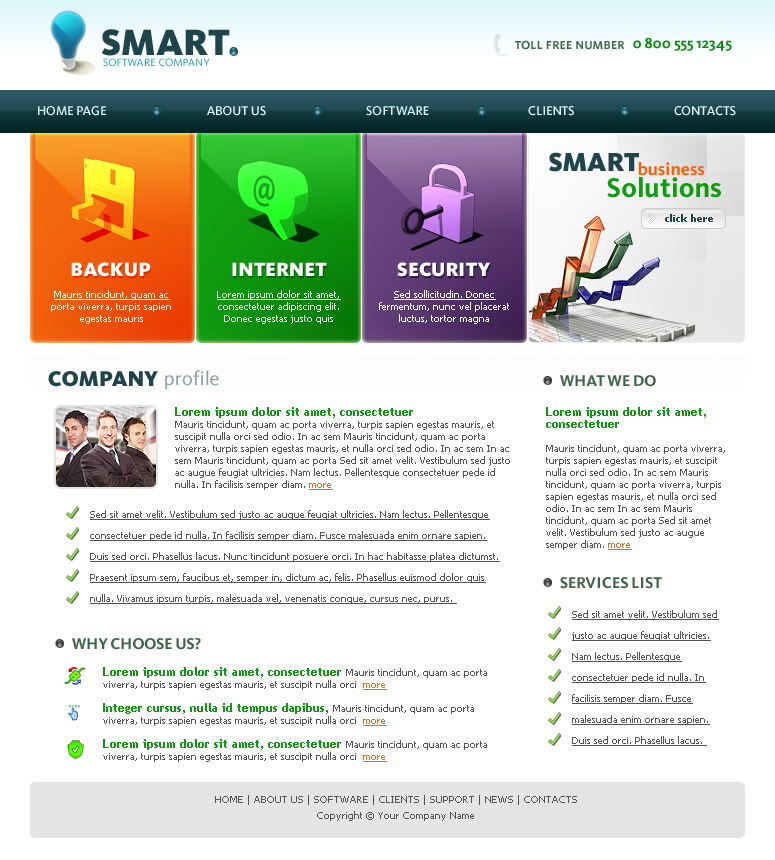
<style>
.page{position:relative;width:775px;height:860px;background:#ffffff}
.page>*{position:absolute;margin:0}
.t1{font:38px "Kievit-Black";color:#1f444c}
.t2{font:12px "Kievit-Bold";color:#3d6547}
.t3{font:15px "Kievit-Bold";color:#0b8c0b}
.t4{font:11px "Kievit-Regular";color:#169ec1}
.t5{font:13px "Kievit-Medium";color:#daf5f9}
.t6{font:27px "Kievit-Black";color:#1f444c}
.t7{font:18px "Kievit-Bold";color:#f2630b}
.t8{font:28px "Kievit-Bold";color:#0f9c0f}
.t9{font:10px "Tahoma-Bold";color:#1f444c}
.t10{font:20px "Kievit-Black";color:#ffffff}
.t11{font:10px/12px "Tahoma";color:#ffffff}
.t12{font:10px/12px "Tahoma";color:#ffffff;text-decoration:underline}
.t13{font:22px "Kievit-Black";color:#1f444c}
.t14{font:20px "Kievit-Book";color:#8ea1a5}
.t15{font:16px "Kievit-Bold";color:#3d6547}
.t16{font:10px/12px "Tahoma";color:#535353}
.t17{font:12px/12px "TrebuchetMS-Bold";color:#0f990f}
.t18{font:10px/12px "Tahoma";color:#f2660c;text-decoration:underline}
.t19{font:10px/21px "Tahoma";color:#535353;text-decoration:underline}
.t20{font:10px/16px "Tahoma";color:#535353}
</style>
<div class="page">
<p class="t1" style="left:101px;top:29px;width:129px;height:27px">SMART</p>
<p class="t2" style="left:515px;top:40px;width:110px;height:10px">TOLL FREE NUMBER</p>
<p class="t3" style="left:633px;top:37px;width:99px;height:14px">0 800 555 12345</p>
<p class="t4" style="left:103px;top:58px;width:107px;height:9px">SOFTWARE COMPANY</p>
<p class="t5" style="left:38px;top:106px;width:68px;height:10px">HOME PAGE</p>
<p class="t5" style="left:207px;top:106px;width:59px;height:10px">ABOUT US</p>
<p class="t5" style="left:366px;top:106px;width:63px;height:10px">SOFTWARE</p>
<p class="t5" style="left:528px;top:106px;width:46px;height:10px">CLIENTS</p>
<p class="t5" style="left:674px;top:106px;width:62px;height:10px">CONTACTS</p>
<p class="t6" style="left:549px;top:152px;width:90px;height:20px">SMART</p>
<p class="t7" style="left:638px;top:162px;width:67px;height:14px">business</p>
<p class="t8" style="left:607px;top:177px;width:114px;height:21px">Solutions</p>
<p class="t9" style="left:665px;top:214px;width:48px;height:8px">click here</p>
<p class="t10" style="left:71px;top:262px;width:80px;height:15px">BACKUP</p>
<p class="t10" style="left:232px;top:262px;width:95px;height:14px">INTERNET</p>
<p class="t10" style="left:397px;top:262px;width:93px;height:15px">SECURITY</p>
<p class="t11" style="left:51px;top:290px;width:120px;height:34px;text-align:center"><span class="t12">Mauris tincidunt, quam ac </span>porta viverra, turpis sapien egestas mauris</p>
<p class="t11" style="left:217px;top:290px;width:124px;height:34px;text-align:center"><span class="t12">Lorem ipsum dolor sit amet, </span>consectetuer adipiscing elit. Donec egestas justo quis</p>
<p class="t11" style="left:379px;top:290px;width:130px;height:34px;text-align:center"><span class="t12">Sed sollicitudin. Donec </span>fermentum, nunc vel placerat luctus, tortor magna</p>
<p class="t13" style="left:48px;top:371px;width:110px;height:16px">COMPANY</p>
<p class="t14" style="left:165px;top:370px;width:54px;height:20px">profile</p>
<p class="t15" style="left:560px;top:375px;width:96px;height:12px">WHAT WE DO</p>
<p class="t16" style="left:175px;top:407px;width:335px;height:83px"><span class="t17">Lorem ipsum dolor sit amet, consectetuer <br></span>Mauris tincidunt, quam ac porta viverra, turpis sapien egestas mauris, et suscipit nulla orci sed odio. In ac sem Mauris tincidunt, quam ac porta viverra, turpis sapien egestas mauris, et nulla orci sed odio. In ac sem In ac sem Mauris tincidunt, quam ac porta Sed sit amet velit. Vestibulum sed justo ac augue feugiat ultricies. Nam lectus. Pellentesque consectetuer pede id nulla. In facilisis semper diam. <span class="t18">more</span></p>
<p class="t16" style="left:546px;top:407px;width:179px;height:143px"><span class="t17">Lorem ipsum dolor sit amet, consectetuer <br><br></span>Mauris tincidunt, quam ac porta viverra, turpis sapien egestas mauris, et suscipit nulla orci sed odio. In ac sem Mauris tincidunt, quam ac porta viverra, turpis sapien egestas mauris, et nulla orci sed odio. In ac sem In ac sem Mauris tincidunt, quam ac porta Sed sit amet velit. Vestibulum sed justo ac augue semper diam. <span class="t18">more</span></p>
<p class="t19" style="left:90px;top:510px;width:410px;height:94px">Sed sit amet velit. Vestibulum sed justo ac augue feugiat ultricies. Nam lectus. Pellentesque consectetuer pede id nulla. In facilisis semper diam. Fusce malesuada enim ornare sapien. Duis sed orci. Phasellus lacus. Nunc tincidunt posuere orci. In hac habitasse platea dictumst. Praesent ipsum sem, faucibus et, semper in, dictum ac, felis. Phasellus euismod dolor quis nulla. Vivamus ipsum turpis, malesuada vel, venenatis congue, cursus nec, purus.</p>
<p class="t15" style="left:560px;top:577px;width:102px;height:12px">SERVICES LIST</p>
<p class="t19" style="left:572px;top:610px;width:147px;height:136px">Sed sit amet velit. Vestibulum sed justo ac augue feugiat ultricies. Nam lectus. Pellentesque consectetuer pede id nulla. In facilisis semper diam. Fusce malesuada enim ornare sapien. Duis sed orci. Phasellus lacus.</p>
<p class="t15" style="left:72px;top:638px;width:129px;height:12px">WHY CHOOSE US?</p>
<p class="t16" style="left:103px;top:667px;width:384px;height:23px"><span class="t17">Lorem ipsum dolor sit amet, consectetuer </span>Mauris tincidunt, quam ac porta viverra, turpis sapien egestas mauris, et suscipit nulla orci  <span class="t18">more</span></p>
<p class="t16" style="left:103px;top:703px;width:371px;height:23px"><span class="t17">Integer cursus, nulla id tempus dapibus, </span>Mauris tincidunt, quam ac porta viverra, turpis sapien egestas mauris, et suscipit nulla orci  <span class="t18">more</span></p>
<p class="t16" style="left:103px;top:739px;width:384px;height:23px"><span class="t17">Lorem ipsum dolor sit amet, consectetuer </span>Mauris tincidunt, quam ac porta viverra, turpis sapien egestas mauris, et suscipit nulla orci  <span class="t18">more</span></p>
<p class="t20" style="left:215px;top:795px;width:362px;height:26px;text-align:center">HOME | ABOUT US | SOFTWARE | CLIENTS | SUPPORT | NEWS | CONTACTS<br>Copyright © Your Company Name</p>
</div>
